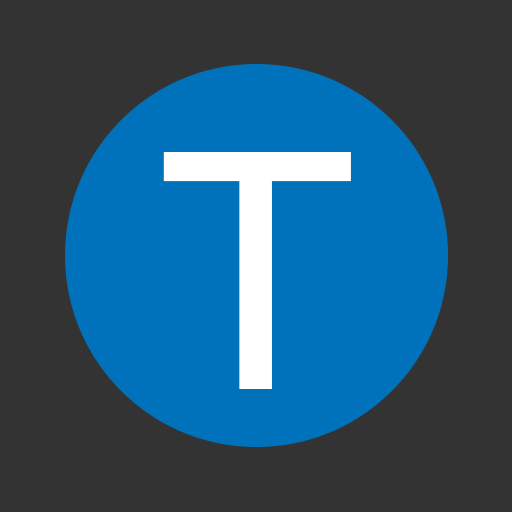
<style>
.page{position:relative;width:512px;height:512px;background:#333333}
.page>*{position:absolute;margin:0}
.t1{font:332.2px "TrebuchetMS";color:#ffffff}
</style>
<div class="page">
<p class="t1" style="left:163px;top:152px;width:188px;height:237px">T</p>
</div>
